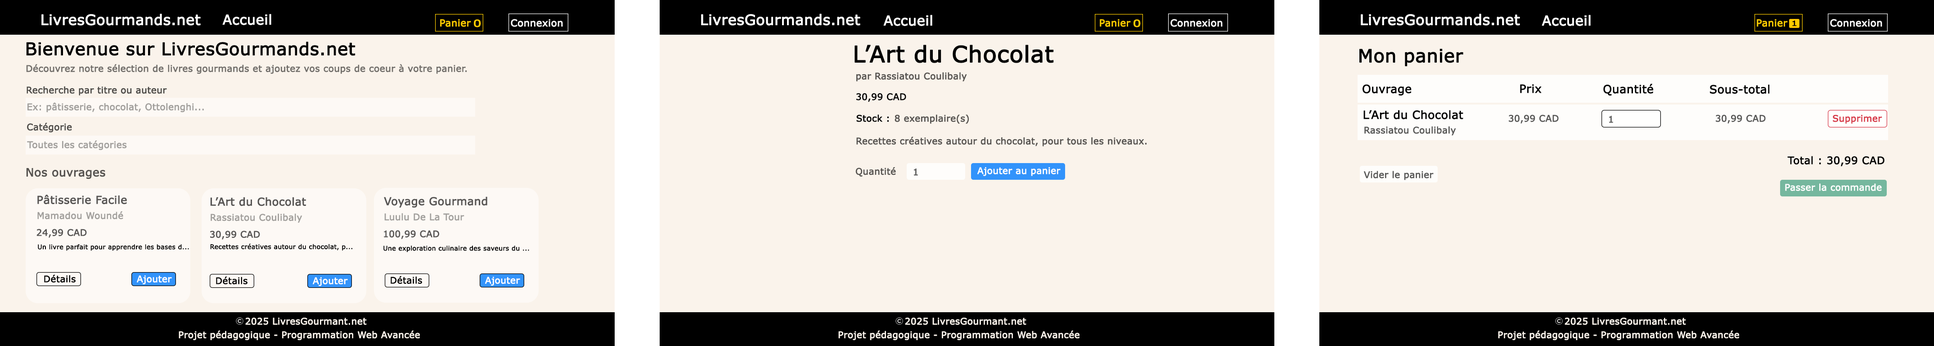
<style>
.page{position:relative;width:1934px;height:346px;background:#faf3eb}
.page>*{position:absolute;margin:0}
.t1{font:14.3px "MSReferenceSansSerif";color:#fefefe;font-weight:bold}
.t2{font:13.5px "MSReferenceSansSerif";color:#ffffff;font-weight:bold}
.t3{font:9.6px "MSReferenceSansSerif";color:#ffcc00;font-weight:bold}
.t4{font:9.6px "MSReferenceSansSerif";color:#ffcc00;font-weight:bold;scale:1.32 1}
.t5{font:9.6px "MSReferenceSansSerif";color:#ffffff;font-weight:bold}
.t6{font:7.1px "MSReferenceSansSerif";color:#000000;font-weight:bold;scale:1.32 1}
.t7{font:17.3px "MSReferenceSansSerif";color:#000000;font-weight:bold}
.t8{font:22.5px "MSReferenceSansSerif";color:#000000;font-weight:bold}
.t9{font:18px "MSReferenceSansSerif";color:#000000;font-weight:bold}
.t10{font:9px "MSReferenceSansSerif";color:#716e6a;font-weight:bold}
.t11{font:9px "MSReferenceSansSerif";color:#565350;font-weight:bold}
.t12{font:9px "MSReferenceSansSerif";color:#4c4a47;font-weight:bold}
.t13{font:11.2px "MSReferenceSansSerif";color:#000000;font-weight:bold}
.t14{font:9px "MSReferenceSansSerif";color:#000000;font-weight:bold}
.t15{font:9px "MSReferenceSansSerif";color:#a19f9c;font-weight:bold}
.t16{font:9px "MSReferenceSansSerif";color:#575756;font-weight:bold}
.t17{font:9px "MSReferenceSansSerif";color:#585857;font-weight:bold}
.t18{font:9px "MSReferenceSansSerif";color:#d73747;font-weight:bold}
.t19{font:10.3px "MSReferenceSansSerif";color:#000000;font-weight:bold}
.t20{font:11.2px "MSReferenceSansSerif";color:#565350;font-weight:bold}
.t21{font:9px "MSReferenceSansSerif";color:#ffffff;font-weight:bold}
.t22{font:10.8px "MSReferenceSansSerif";color:#575554;font-weight:bold}
.t23{font:9px "MSReferenceSansSerif";color:#575554;font-weight:bold}
.t24{font:6.4px "MSReferenceSansSerif";color:#000000;font-weight:bold}
.t25{font:9px "MSReferenceSansSerif";color:#faf3eb;font-weight:bold}
</style>
<div class="page">
<p class="t1" style="left:41px;top:14px;width:160px;height:12px">LivresGourmands.net</p>
<p class="t2" style="left:222px;top:14px;width:49px;height:11px">Accueil</p>
<p class="t1" style="left:701px;top:14px;width:159px;height:12px">LivresGourmands.net</p>
<p class="t2" style="left:883px;top:15px;width:49px;height:11px">Accueil</p>
<p class="t1" style="left:1361px;top:14px;width:159px;height:12px">LivresGourmands.net</p>
<p class="t2" style="left:1542px;top:15px;width:49px;height:11px">Accueil</p>
<p class="t3" style="left:440px;top:19px;width:31px;height:8px">Panier</p>
<p class="t4" style="left:474px;top:19px;width:7px;height:8px">0</p>
<p class="t5" style="left:511px;top:19px;width:52px;height:8px">Connexion</p>
<p class="t3" style="left:1100px;top:19px;width:31px;height:8px">Panier</p>
<p class="t4" style="left:1134px;top:19px;width:7px;height:8px">0</p>
<p class="t5" style="left:1170px;top:19px;width:53px;height:8px">Connexion</p>
<p class="t3" style="left:1757px;top:19px;width:31px;height:8px">Panier</p>
<p class="t6" style="left:1792px;top:20px;width:5px;height:6px">1</p>
<p class="t5" style="left:1830px;top:19px;width:52px;height:8px">Connexion</p>
<p class="t7" style="left:26px;top:41px;width:330px;height:15px">Bienvenue sur LivresGourmands.net</p>
<p class="t8" style="left:855px;top:45px;width:199px;height:18px">L’Art du Chocolat</p>
<p class="t9" style="left:1359px;top:49px;width:104px;height:17px">Mon panier</p>
<p class="t10" style="left:26px;top:64px;width:441px;height:10px">Découvrez notre sélection de livres gourmands et ajoutez vos coups de coeur à votre panier.</p>
<p class="t11" style="left:856px;top:72px;width:111px;height:9px">par Rassiatou Coulibaly</p>
<p class="t12" style="left:27px;top:86px;width:140px;height:9px">Recherche par titre ou auteur</p>
<p class="t13" style="left:1363px;top:84px;width:49px;height:11px">Ouvrage</p>
<p class="t13" style="left:1520px;top:84px;width:22px;height:9px">Prix</p>
<p class="t13" style="left:1603px;top:84px;width:50px;height:12px">Quantité</p>
<p class="t13" style="left:1710px;top:84px;width:60px;height:10px">Sous-total</p>
<p class="t14" style="left:856px;top:93px;width:50px;height:9px">30,99 CAD</p>
<p class="t15" style="left:27px;top:102px;width:177px;height:10px">Ex: pâtisserie, chocolat, Ottolenghi...</p>
<p class="t13" style="left:1364px;top:110px;width:99px;height:9px">L’Art du Chocolat</p>
<p class="t12" style="left:27px;top:122px;width:45px;height:10px">Catégorie</p>
<p class="t14" style="left:856px;top:114px;width:33px;height:8px">Stock :</p>
<p class="t11" style="left:895px;top:114px;width:74px;height:10px">8 exemplaire(s)</p>
<p class="t16" style="left:1364px;top:126px;width:92px;height:9px">Rassiatou Coulibaly</p>
<p class="t16" style="left:1509px;top:114px;width:50px;height:9px">30,99 CAD</p>
<p class="t17" style="left:1609px;top:116px;width:4px;height:7px">1</p>
<p class="t16" style="left:1716px;top:114px;width:50px;height:9px">30,99 CAD</p>
<p class="t18" style="left:1833px;top:115px;width:49px;height:9px">Supprimer</p>
<p class="t11" style="left:856px;top:136px;width:291px;height:10px">Recettes créatives autour du chocolat, pour tous les niveaux.</p>
<p class="t15" style="left:27px;top:140px;width:100px;height:10px">Toutes les catégories</p>
<p class="t19" style="left:1787px;top:156px;width:98px;height:10px">Total : 30,99 CAD</p>
<p class="t20" style="left:26px;top:168px;width:79px;height:11px">Nos ouvrages</p>
<p class="t11" style="left:855px;top:167px;width:41px;height:9px">Quantité</p>
<p class="t16" style="left:914px;top:168px;width:4px;height:8px">1</p>
<p class="t21" style="left:977px;top:167px;width:84px;height:9px">Ajouter au panier</p>
<p class="t16" style="left:1364px;top:171px;width:70px;height:9px">Vider le panier</p>
<p class="t21" style="left:1785px;top:183px;width:97px;height:8px">Passer la commande</p>
<p class="t22" style="left:37px;top:194px;width:90px;height:10px">Pâtisserie Facile</p>
<p class="t22" style="left:210px;top:197px;width:96px;height:9px">L’Art du Chocolat</p>
<p class="t22" style="left:384px;top:196px;width:103px;height:11px">Voyage Gourmand</p>
<p class="t15" style="left:37px;top:211px;width:86px;height:8px">Mamadou Woundé</p>
<p class="t15" style="left:211px;top:213px;width:91px;height:10px">Rassiatou Coulibaly</p>
<p class="t15" style="left:384px;top:213px;width:80px;height:7px">Luulu De La Tour</p>
<p class="t23" style="left:36px;top:229px;width:51px;height:9px">24,99 CAD</p>
<p class="t23" style="left:210px;top:230px;width:50px;height:9px">30,99 CAD</p>
<p class="t23" style="left:384px;top:230px;width:55px;height:9px">100,99 CAD</p>
<p class="t24" style="left:38px;top:244px;width:151px;height:7px">Un livre parfait pour apprendre les bases d...</p>
<p class="t24" style="left:210px;top:243px;width:142px;height:7px">Recettes créatives autour du chocolat, p...</p>
<p class="t24" style="left:383px;top:245px;width:146px;height:7px">Une exploration culinaire des saveurs du ...</p>
<p class="t14" style="left:44px;top:274px;width:32px;height:9px">Détails</p>
<p class="t21" style="left:137px;top:275px;width:35px;height:9px">Ajouter</p>
<p class="t14" style="left:216px;top:276px;width:32px;height:8px">Détails</p>
<p class="t21" style="left:313px;top:277px;width:35px;height:9px">Ajouter</p>
<p class="t14" style="left:391px;top:275px;width:31px;height:9px">Détails</p>
<p class="t21" style="left:485px;top:276px;width:35px;height:9px">Ajouter</p>
<p class="t25" style="left:245px;top:317px;width:122px;height:7px">2025 LivresGourmant.net</p>
<p class="t25" style="left:905px;top:317px;width:121px;height:7px">2025 LivresGourmant.net</p>
<p class="t25" style="left:1565px;top:317px;width:121px;height:7px">2025 LivresGourmant.net</p>
<p class="t25" style="left:179px;top:330px;width:241px;height:10px">Projet pédagogique - Programmation Web Avancée</p>
<p class="t25" style="left:838px;top:330px;width:242px;height:10px">Projet pédagogique - Programmation Web Avancée</p>
<p class="t25" style="left:1498px;top:330px;width:241px;height:10px">Projet pédagogique - Programmation Web Avancée</p>
</div>
